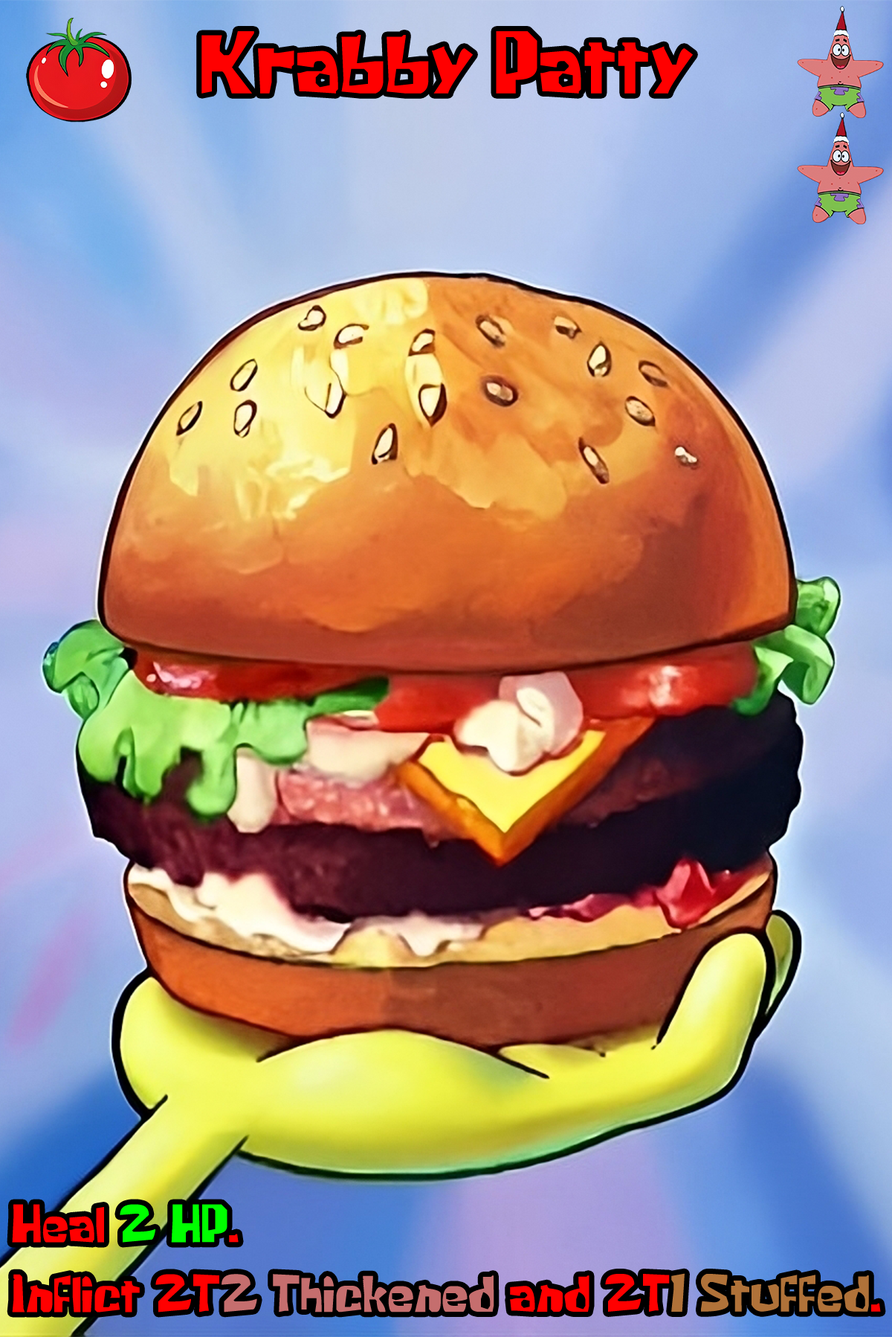
<style>
.page{position:relative;width:892px;height:1337px}
.page>*{position:absolute;margin:0}
.t1{font:141.9px "KrabbyPatty";color:#ff0000}
.t2{font:86.2px/69.8px "KrabbyPatty";color:#ff0000}
.t3{font:86.2px/69.8px "KrabbyPatty";color:#00ff00}
.t4{font:86.2px/69.8px "KrabbyPatty";color:#c56e6e}
.t5{font:86.2px/69.8px "KrabbyPatty";color:#b07239}
</style>
<div class="page">
<p class="t1" style="left:201px;top:31px;width:491px;height:63px">Krabby Patty</p>
<p class="t2" style="left:12px;top:1204px;width:868px;height:109px">Heal <span class="t3">2 HP</span>.<br>Inflict 2T<span class="t4">2 Thickened </span>and 2T<span class="t5">1 Stuffed</span>.</p>
</div>
